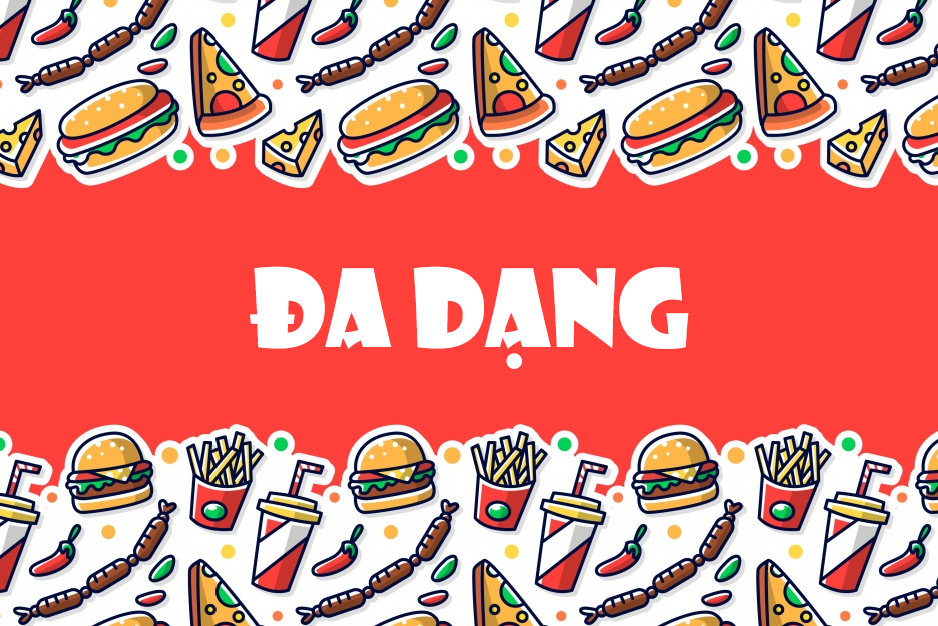
<style>
.page{position:relative;width:938px;height:626px;background:#ff403b}
.page>*{position:absolute;margin:0}
.t1{font:105px "UTM-Showcard";color:#ffffff}
</style>
<div class="page">
<p class="t1" style="left:250px;top:266px;width:439px;height:103px">Đa dạng</p>
</div>
